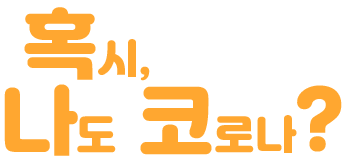
<style>
.page{position:relative;width:350px;height:164px;background:#ffffff}
.page>*{position:absolute;margin:0}
.t1{font:40.5px/75.9px "Jalnan";color:#ffa730}
.t2{font:60.7px/75.9px "Jalnan";color:#ffa730}
.t3{font:75.9px/75.9px "Jalnan";color:#ffa730}
</style>
<div class="page">
<p class="t1" style="left:4px;top:7px;width:338px;height:149px"><span class="t2"> </span><span class="t3">혹</span>시,<br><span class="t3">나</span>도<span class="t3"> 코</span>로나<span class="t3">?</span></p>
</div>
